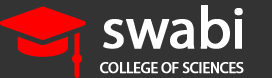
<style>
.page{position:relative;width:272px;height:78px;background:#333333}
.page>*{position:absolute;margin:0}
.t1{font:59px "MyriadPro-Regular";letter-spacing:-0.02em;color:#ffffff;font-weight:bold}
.t2{font:15px "MyriadPro-Regular";letter-spacing:-0.02em;color:#ffffff;text-transform:uppercase;font-weight:bold}
</style>
<div class="page">
<p class="t1" style="left:103px;top:5px;width:140px;height:44px">swabi</p>
<p class="t2" style="left:100px;top:62px;width:144px;height:12px">college of sciences</p>
</div>
